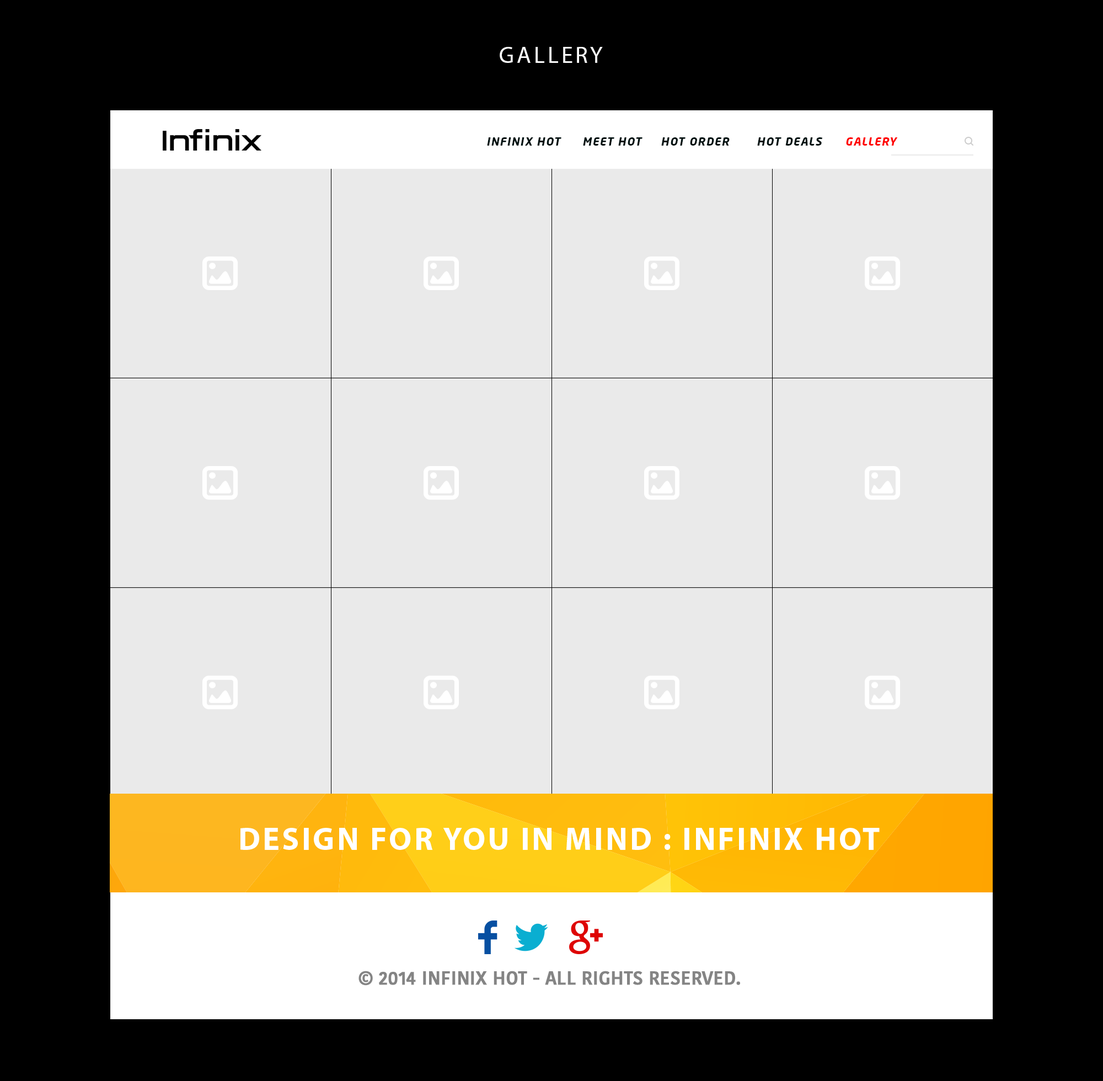
<style>
.page{position:relative;width:1103px;height:1081px;background:#eaeaea}
.page>*{position:absolute;margin:0}
.t1{font:23.2px "MyriadPro-Regular";letter-spacing:0.1em;color:#ffffff;text-transform:uppercase}
.t2{font:11.1px "NeoSansStd-BoldItalic";letter-spacing:0.075em;color:#001111;text-transform:uppercase}
.t3{font:11.1px "NeoSansStd-BoldItalic";letter-spacing:0.075em;color:#ff0000;text-transform:uppercase}
.t4{font:32.2px "MyriadPro-Bold";letter-spacing:0.075em;color:#ffffff}
.t5{font:18.8px "KohinoorDevanagari-Medium";letter-spacing:-0.01em;color:#848484;text-transform:uppercase;font-weight:bold;scale:0.96 1}
</style>
<div class="page">
<p class="t1" style="left:500px;top:47px;width:103px;height:16px">gallery</p>
<p class="t2" style="left:487px;top:137px;width:74px;height:9px">INFINIX HOT</p>
<p class="t2" style="left:583px;top:137px;width:60px;height:9px">MEET HOT</p>
<p class="t2" style="left:661px;top:137px;width:69px;height:9px">HOT ORDER</p>
<p class="t2" style="left:757px;top:137px;width:65px;height:9px">HOT DEALS</p>
<p class="t3" style="left:846px;top:137px;width:52px;height:9px">GALLERY</p>
<p class="t4" style="left:240px;top:828px;width:640px;height:22px">DESIGN FOR YOU IN MIND : INFINIX HOT</p>
<p class="t5" style="left:358px;top:971px;width:382px;height:15px">© 2014 infinix HOT - all rights reserved.</p>
</div>
